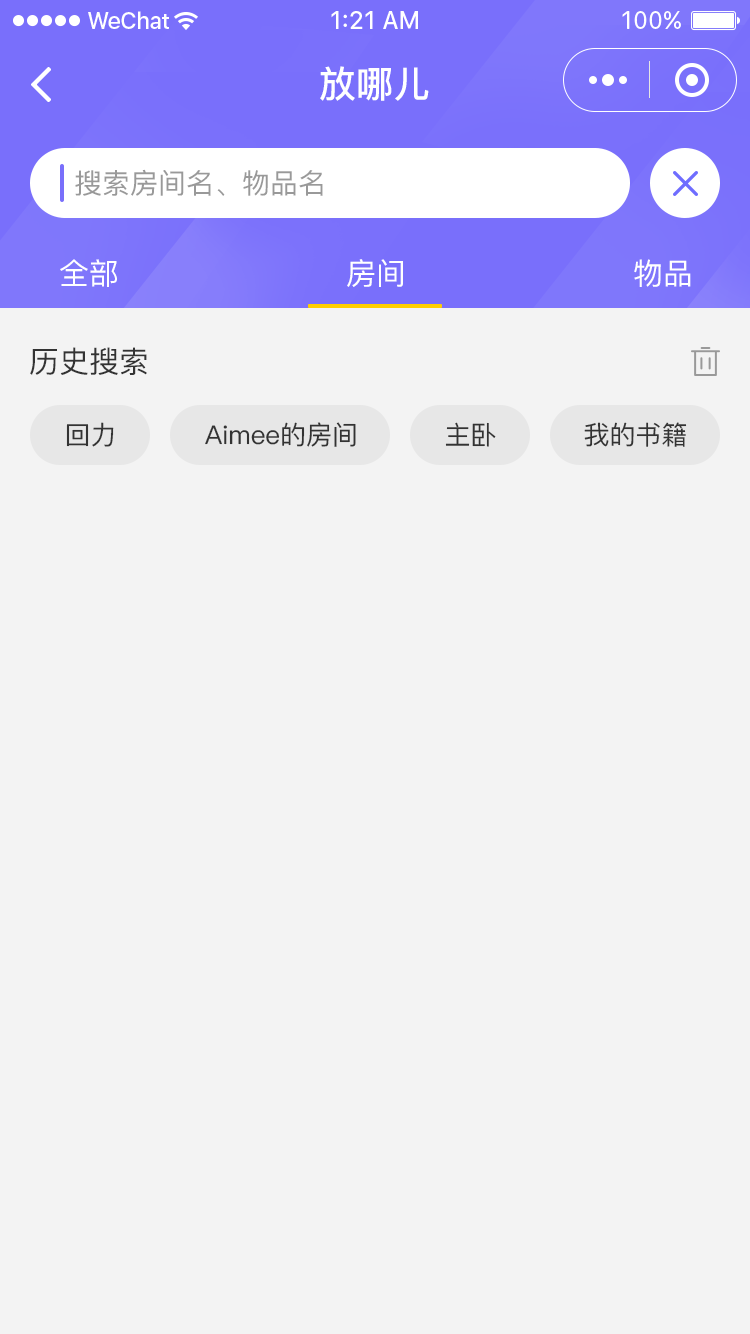
<style>
.page{position:relative;width:750px;height:1334px;background:#f3f3f3}
.page>*{position:absolute;margin:0}
.t1{font:37px "PingFang-SC-Bold";color:#ffffff}
.t2{font:28px "PingFang-SC-Medium";color:#999999}
.t3{font:30px "PingFang-SC-Medium";color:#ffffff}
.t4{font:30px "PingFang-SC-Medium";color:#333333}
.t5{font:26px "PingFang-SC-Medium";color:#333333}
</style>
<div class="page">
<p class="t1" style="left:320px;top:66px;width:109px;height:35px">放哪儿</p>
<p class="t2" style="left:75px;top:169px;width:248px;height:27px">搜索房间名、物品名</p>
<p class="t3" style="left:60px;top:259px;width:57px;height:28px">全部</p>
<p class="t3" style="left:347px;top:259px;width:56px;height:28px">房间</p>
<p class="t3" style="left:634px;top:259px;width:57px;height:28px">物品</p>
<p class="t4" style="left:30px;top:347px;width:117px;height:28px">历史搜索</p>
<p class="t5" style="left:66px;top:422px;width:48px;height:25px">回力</p>
<p class="t5" style="left:205px;top:422px;width:151px;height:25px">Aimee的房间</p>
<p class="t5" style="left:445px;top:422px;width:51px;height:25px">主卧</p>
<p class="t5" style="left:584px;top:422px;width:103px;height:25px">我的书籍</p>
</div>
